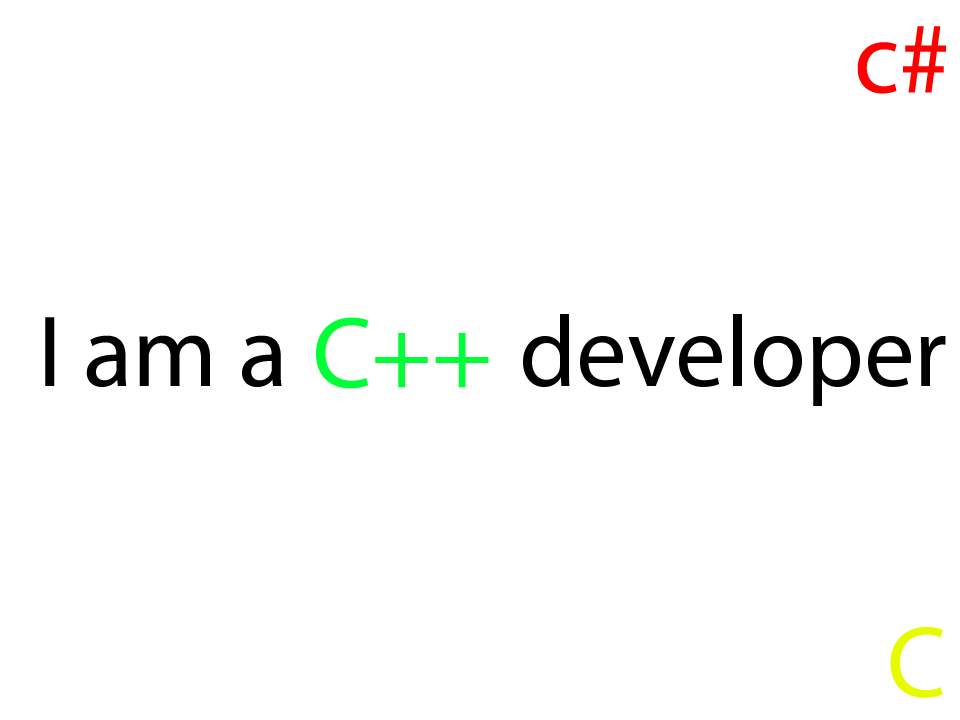
<style>
.page{position:relative;width:960px;height:720px;background:#ffffff}
.page>*{position:absolute;margin:0}
.t1{font:101.6px "MyriadPro-Regular";color:#ff0000}
.t2{font:101.6px "MyriadPro-Regular";color:#000000}
.t3{font:101.6px "MyriadPro-Regular";color:#00ff36}
.t4{font:101.6px "MyriadPro-Regular";color:#e6fb00}
</style>
<div class="page">
<p class="t1" style="left:857px;top:26px;width:89px;height:68px">c#</p>
<p class="t2" style="left:45px;top:317px;width:237px;height:70px">I am a</p>
<p class="t3" style="left:316px;top:317px;width:173px;height:72px">C++</p>
<p class="t2" style="left:523px;top:314px;width:423px;height:92px">developer</p>
<p class="t4" style="left:890px;top:627px;width:53px;height:71px">C</p>
</div>
